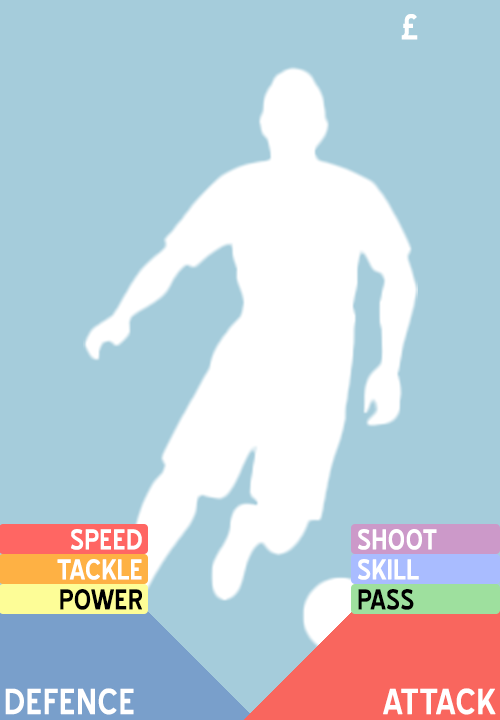
<style>
.page{position:relative;width:500px;height:720px;background:#a5ccdb}
.page>*{position:absolute;margin:0}
.t1{font:34.2px "BlueHighway-Regular";color:#ffffff;font-weight:bold;scale:0.94 1}
.t2{font:27.1px "BlueHighway-Regular";color:#ffffff;font-weight:bold;scale:0.94 1}
.t3{font:27.1px "BlueHighway-Regular";color:#000000;font-weight:bold;scale:0.94 1}
.t4{font:34.7px "BlueHighway-Regular";color:#ffffff;font-weight:bold;scale:0.94 1}
</style>
<div class="page">
<p class="t1" style="left:401px;top:14px;width:17px;height:26px">£</p>
<p class="t2" style="left:71px;top:529px;width:71px;height:21px">SPEED</p>
<p class="t2" style="left:358px;top:529px;width:79px;height:21px">SHOOT</p>
<p class="t2" style="left:57px;top:559px;width:85px;height:21px">TACKLE</p>
<p class="t2" style="left:358px;top:559px;width:61px;height:21px">SKILL</p>
<p class="t3" style="left:60px;top:589px;width:82px;height:21px">POWER</p>
<p class="t3" style="left:358px;top:589px;width:56px;height:21px">PASS</p>
<p class="t4" style="left:5px;top:688px;width:129px;height:27px">DEFENCE</p>
<p class="t4" style="left:383px;top:688px;width:113px;height:27px">ATTACK</p>
</div>
